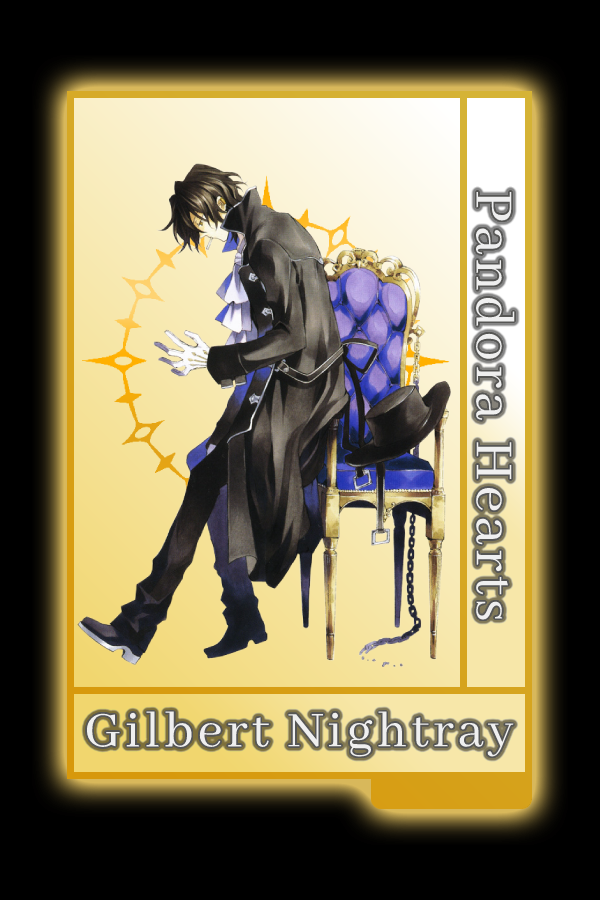
<style>
.page{position:relative;width:600px;height:900px;background:#000000}
.page>*{position:absolute;margin:0}
.t1{font:59.1px "AbhayaLibre-Regular";letter-spacing:0.072em;color:#efefef}
.t2{font:55px "AbhayaLibre-Regular";letter-spacing:0.072em;color:#efefef}
</style>
<div class="page">
<p class="t1" style="left:476px;top:192px;width:39px;height:428px;rotate:90deg">Pandora Hearts</p>
<p class="t2" style="left:86px;top:711px;width:428px;height:46px">Gilbert Nightray</p>
</div>
